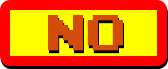
<style>
.page{position:relative;width:168px;height:69px;background:#ffff00}
.page>*{position:absolute;margin:0}
.t1{font:39.9px "PressStartReg";color:#d34c0a}
</style>
<div class="page">
<p class="t1" style="left:48px;top:15px;width:75px;height:36px">NO</p>
<p class="t1" style="left:49px;top:18px;width:75px;height:36px">NO</p>
</div>
